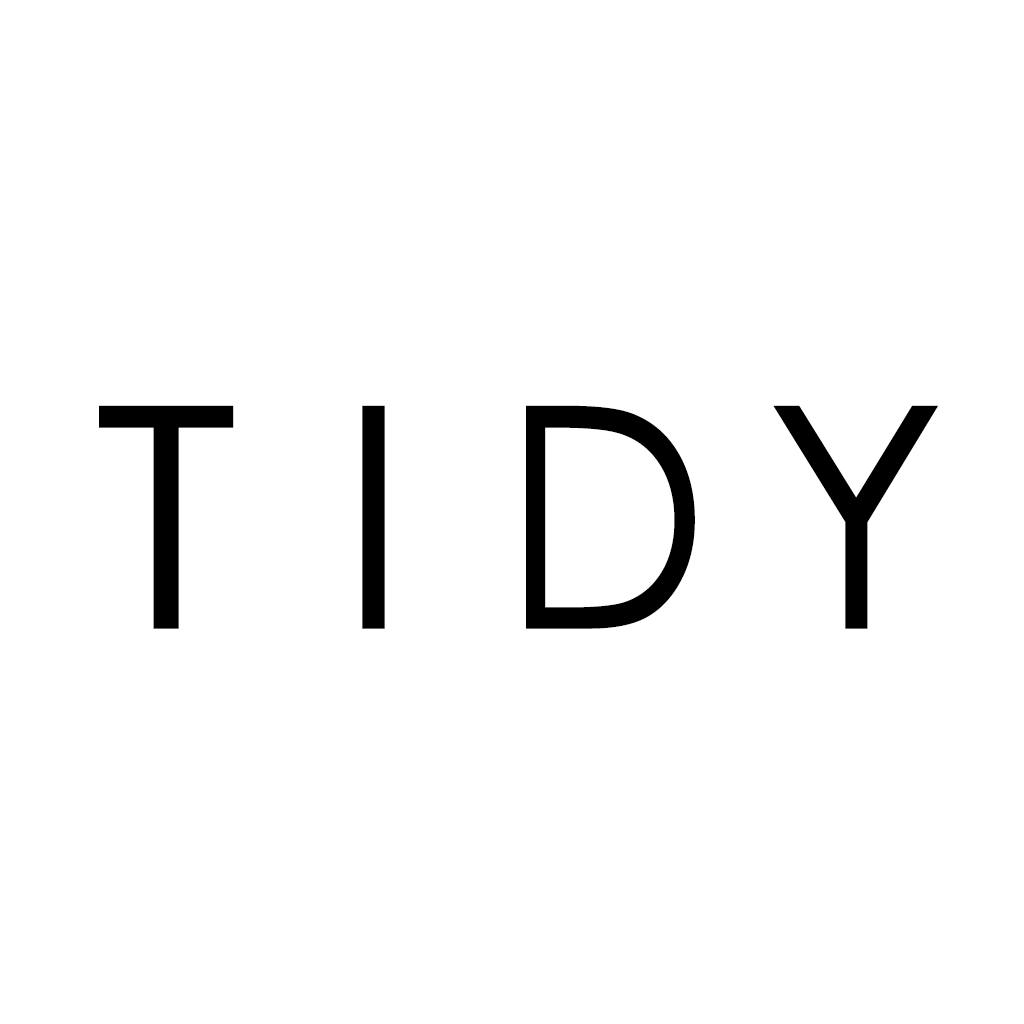
<style>
.page{position:relative;width:1024px;height:1024px;background:#ffffff}
.page>*{position:absolute;margin:0}
.t1{font:310px "CenturyGothic";letter-spacing:0.3em;color:#000000;scale:1.1 1}
.t2{font:310px "CenturyGothic";letter-spacing:0.3em;color:#000000}
.t3{font:310px "CenturyGothic";letter-spacing:0.3em;color:#000000;scale:0.9 1}
</style>
<div class="page">
<p class="t1" style="left:99px;top:405px;width:839px;height:224px">T<span class="t2">I</span><span class="t3">D</span><span class="t2">Y</span></p>
</div>
